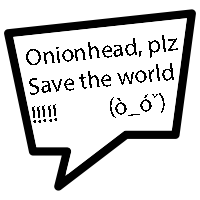
<style>
.page{position:relative;width:200px;height:200px;background:#ffffff}
.page>*{position:absolute;margin:0}
.t1{font:24px "MyriadPro-Regular";color:#000000}
</style>
<div class="page">
<p class="t1" style="left:26px;top:35px;width:152px;height:88px;rotate:-6deg">Onionhead, plz<br>Save the world<br>!!!!!          (ò_óˇ)</p>
</div>
